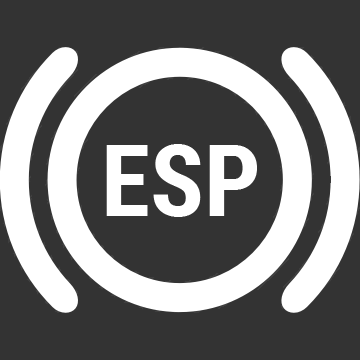
<style>
.page{position:relative;width:360px;height:360px;background:#333333}
.page>*{position:absolute;margin:0}
.t1{font:100px "RobotoCondensed-Bold";color:#ffffff}
</style>
<div class="page">
<p class="t1" style="left:106px;top:144px;width:151px;height:73px">ESP</p>
</div>
